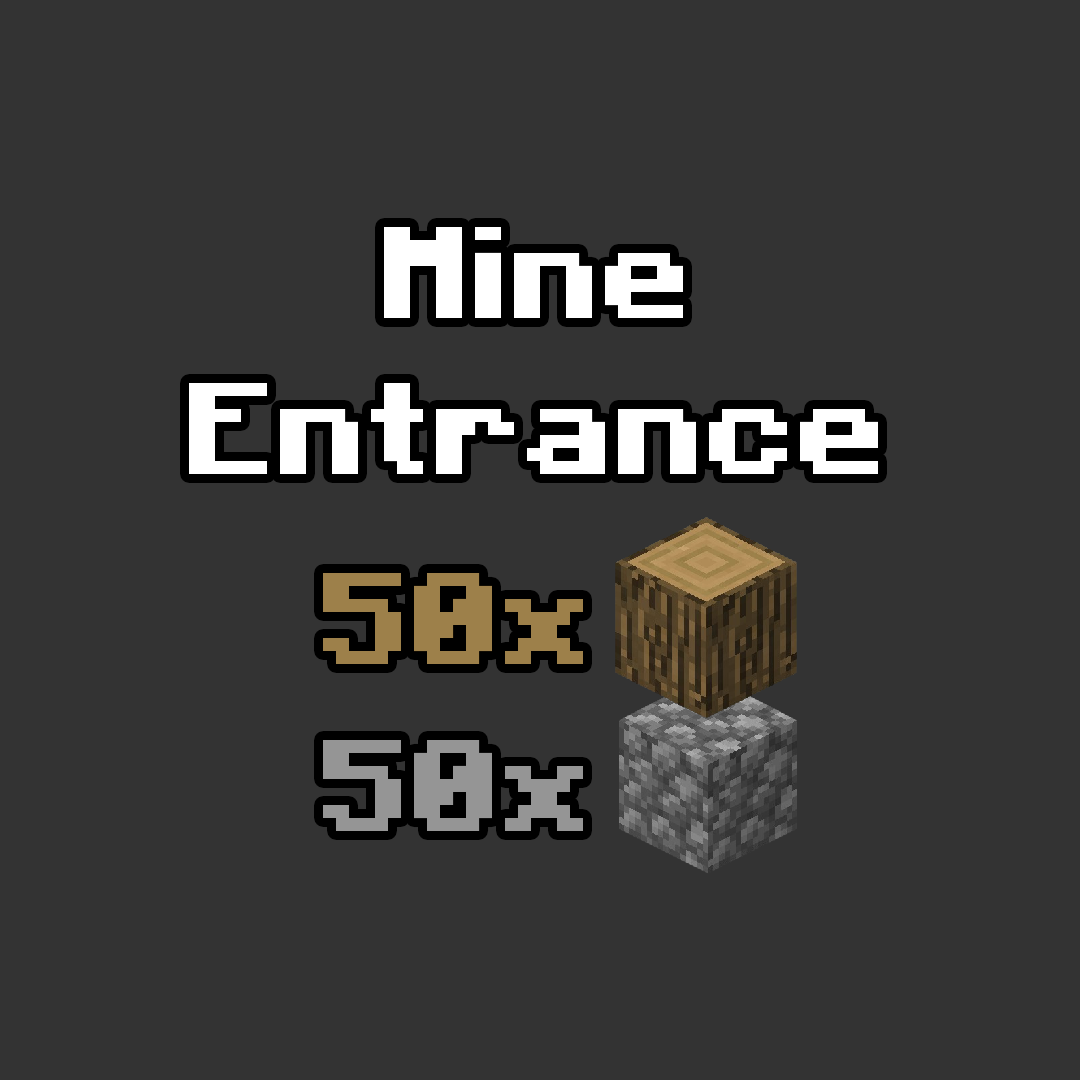
<style>
.page{position:relative;width:1080px;height:1080px;background:#333333}
.page>*{position:absolute;margin:0}
.t1{font:130px "Minecraft-Bold";color:#ffffff}
.t2{font:130px "Minecraft-Bold";color:#9d804a}
.t3{font:130px "Minecraft-Bold";color:#959595}
</style>
<div class="page">
<p class="t1" style="left:189px;top:227px;width:689px;height:247px;text-align:center">Mine <br>Entrance</p>
<p class="t2" style="left:323px;top:573px;width:260px;height:91px">50x</p>
<p class="t3" style="left:323px;top:740px;width:260px;height:91px">50x</p>
</div>
